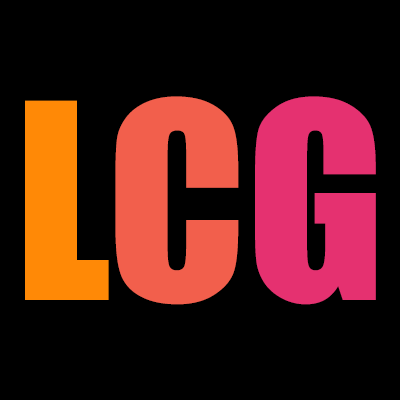
<style>
.page{position:relative;width:400px;height:400px;background:#000000}
.page>*{position:absolute;margin:0}
.t1{font:252px "Impact";color:#ff8906}
.t2{font:252px "Impact";color:#f25f4c}
.t3{font:252px "Impact";color:#e53170}
</style>
<div class="page">
<p class="t1" style="left:25px;top:96px;width:351px;height:209px">L<span class="t2">C</span><span class="t3">G</span></p>
</div>
